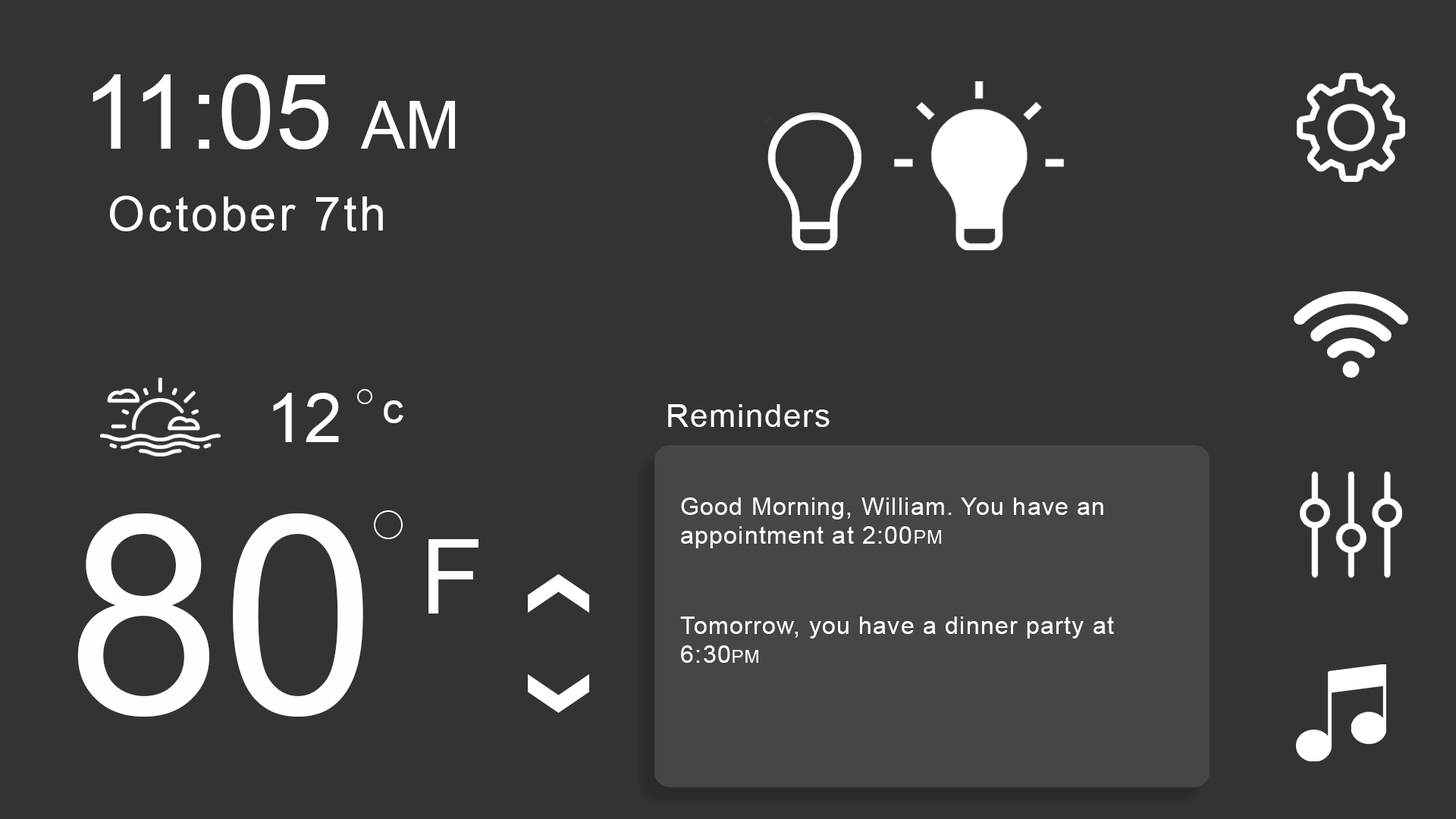
<style>
.page{position:relative;width:1456px;height:819px;background:#333333}
.page>*{position:absolute;margin:0}
.t1{font:103.1px "ArialMT";color:#fffefe}
.t2{font:66px "ArialMT";color:#fffefe}
.t3{font:47.8px "ArialMT";letter-spacing:0.06em;color:#ffffff}
.t4{font:68.3px "ArialMT";color:#fffefe}
.t5{font:42.5px "ArialMT";color:#fffefe}
.t6{font:31.9px "ArialMT";letter-spacing:0.04em;color:#ffffff}
.t7{font:24.3px "ArialMT";letter-spacing:0.04em;color:#ffffff}
.t8{font:19px "ArialMT";letter-spacing:0.04em;color:#ffffff}
.t9{font:278.3px "ArialMT";color:#fffefe}
.t10{font:18.2px "ArialMT";letter-spacing:0.04em;color:#ffffff}
</style>
<div class="page">
<p class="t1" style="left:93px;top:74px;width:362px;height:75px">11:05 <span class="t2">AM</span></p>
<p class="t3" style="left:110px;top:196px;width:273px;height:35px">October 7th</p>
<p class="t4" style="left:273px;top:393px;width:66px;height:49px">12</p>
<p class="t5" style="left:384px;top:400px;width:19px;height:23px">c</p>
<p class="t6" style="left:668px;top:404px;width:162px;height:23px">Reminders</p>
<p class="t7" style="left:681px;top:497px;width:422px;height:51px">Good Morning, William. You have an appointment at 2:00<span class="t8">PM</span></p>
<p class="t9" style="left:77px;top:513px;width:286px;height:204px">80</p>
<p class="t1" style="left:428px;top:539px;width:51px;height:74px">F</p>
<p class="t7" style="left:680px;top:617px;width:434px;height:46px">Tomorrow, you have a dinner party at 6:30<span class="t10">PM</span></p>
</div>
